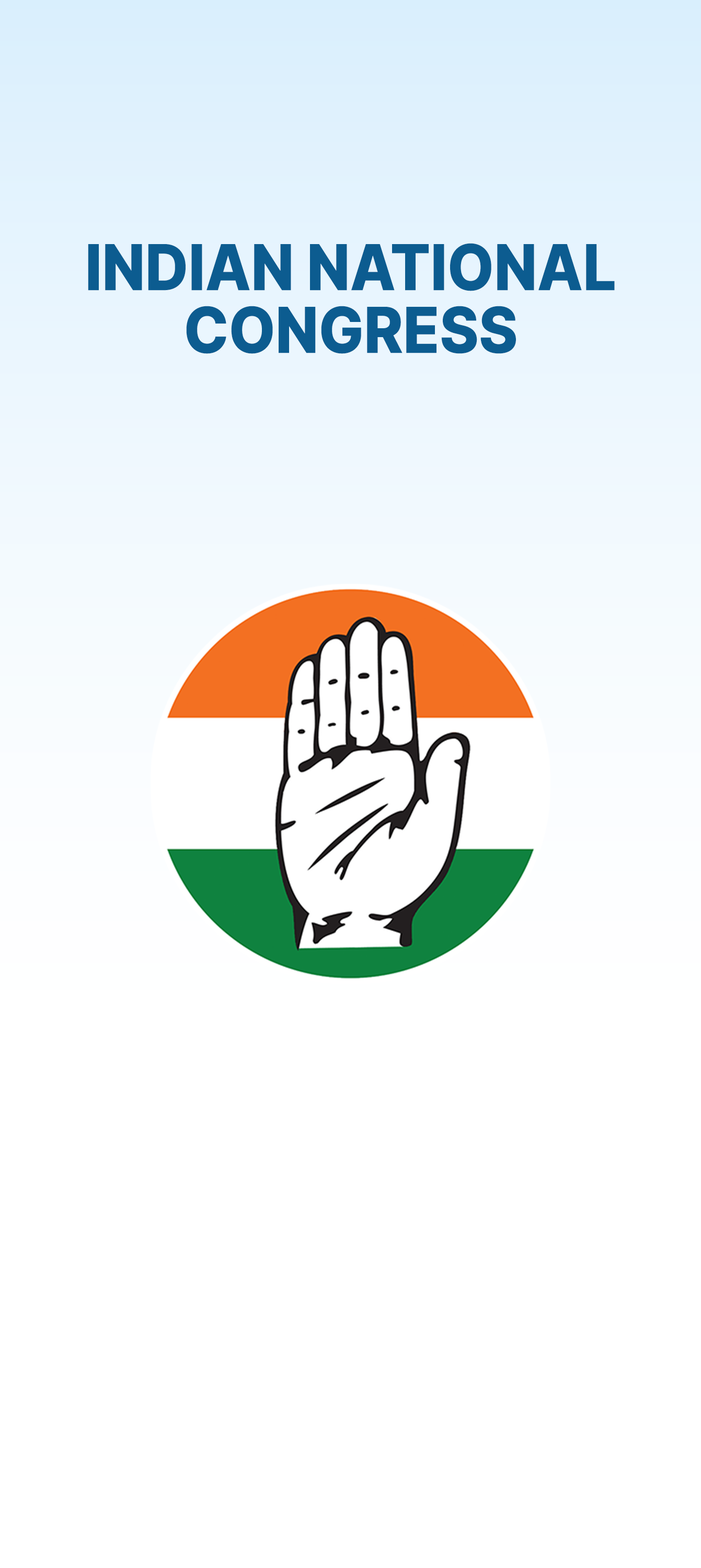
<style>
.page{position:relative;width:701px;height:1568px;background:#ffffff}
.page>*{position:absolute;margin:0}
.t1{font:63.2px/62.7px "Inter-ExtraBold";color:#0c5c90;scale:0.94 1}
</style>
<div class="page">
<p class="t1" style="left:88px;top:243px;width:527px;height:111px;text-align:center">INDIAN NATIONAL<br>CONGRESS</p>
</div>
